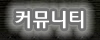
<style>
.page{position:relative;width:100px;height:40px}
.page>*{position:absolute;margin:0}
.t1{font:21px "2002L";color:#ffffff}
</style>
<div class="page">
<p class="t1" style="left:15px;top:10px;width:69px;height:19px">커뮤니티</p>
</div>
